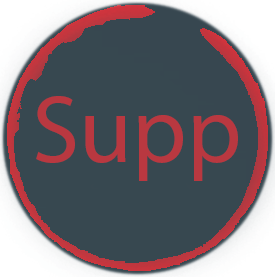
<style>
.page{position:relative;width:275px;height:277px;background:#374850}
.page>*{position:absolute;margin:0}
.t1{font:96px "MyriadPro-Regular";color:#b93840}
</style>
<div class="page">
<p class="t1" style="left:36px;top:96px;width:202px;height:85px">Supp</p>
</div>
